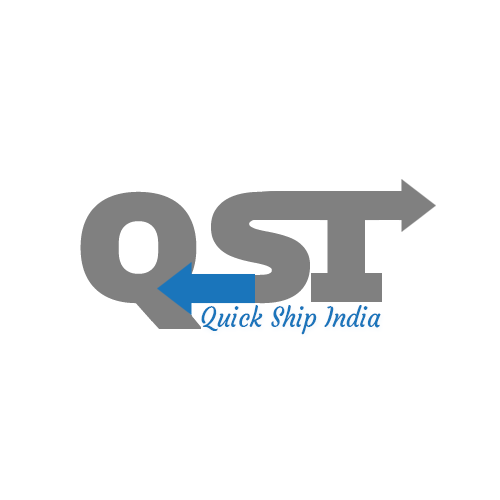
<style>
.page{position:relative;width:500px;height:500px;background:#ffffff}
.page>*{position:absolute;margin:0}
.t1{font:26px "Courgette-Regular";color:#1a75bb;scale:0.96 1}
</style>
<div class="page">
<p class="t1" style="left:201px;top:305px;width:180px;height:30px">Quick Ship India</p>
</div>
